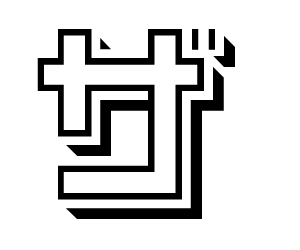
<style>
.page{position:relative;width:300px;height:250px;background:#ffffff}
.page>*{position:absolute;margin:0}
.t1{font:241.8px "TA-rb0925";letter-spacing:0.08em;color:#000000}
</style>
<div class="page">
<p class="t1" style="left:37px;top:29px;width:198px;height:190px">ザ</p>
</div>
